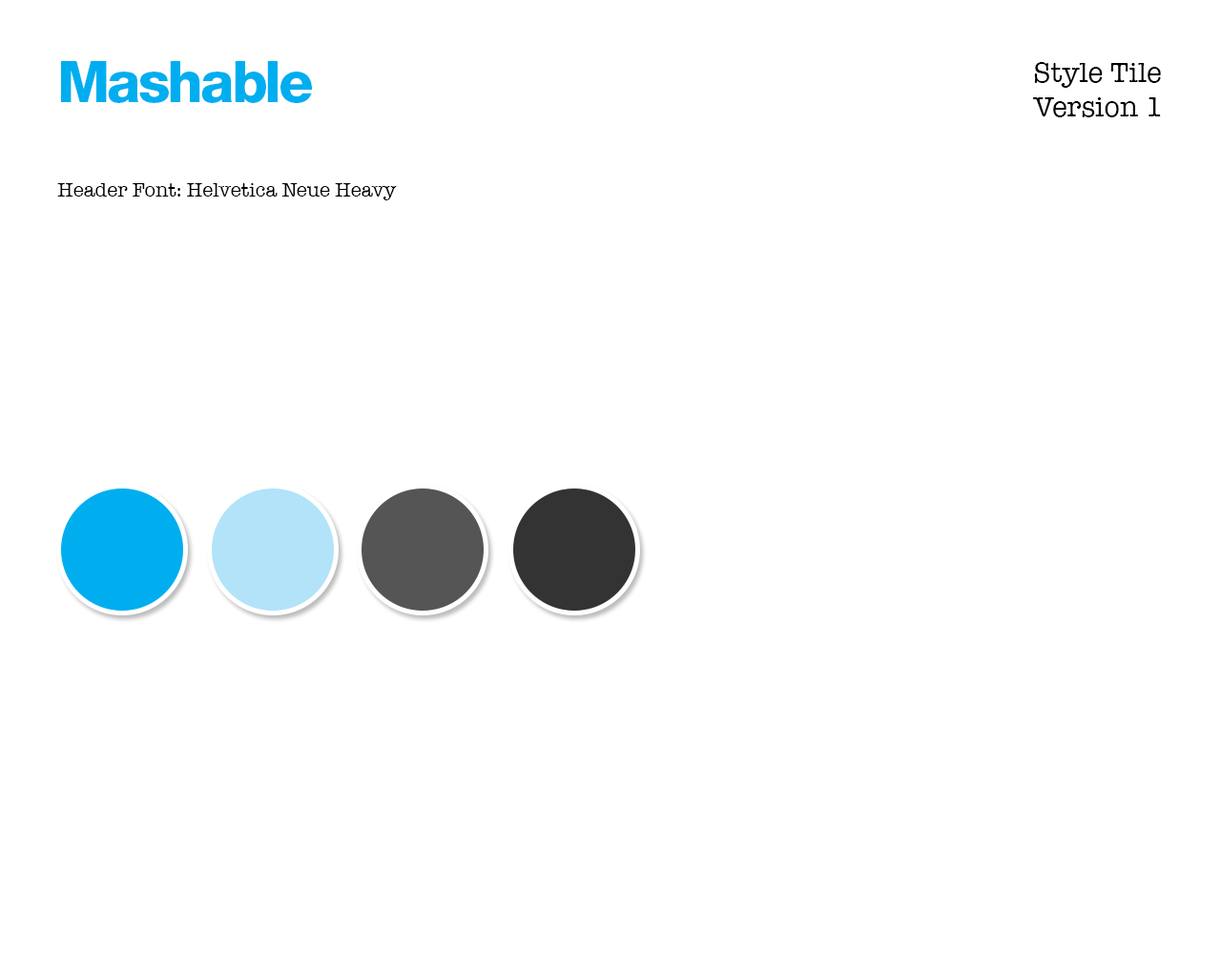
<style>
.page{position:relative;width:1221px;height:977px;background:#ffffff}
.page>*{position:absolute;margin:0}
.t1{font:57.2px "HelveticaNeue-Heavy";letter-spacing:-0.05em;color:#00aeef}
.t2{font:28.6px "AmericanTypewriter";color:#000000}
.t3{font:20px "AmericanTypewriter";color:#000000}
</style>
<div class="page">
<p class="t1" style="left:61px;top:61px;width:251px;height:42px">Mashable</p>
<p class="t2" style="left:1032px;top:62px;width:129px;height:55px">Style Tile<br>Version 1</p>
<p class="t3" style="left:57px;top:183px;width:340px;height:17px">Header Font: Helvetica Neue Heavy</p>
</div>
